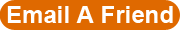
<style>
.page{position:relative;width:180px;height:30px;background:#df6900}
.page>*{position:absolute;margin:0}
.t1{font:24px "Arial-BoldMT";color:#ffffff}
</style>
<div class="page">
<p class="t1" style="left:7px;top:6px;width:166px;height:17px">Email A Friend</p>
</div>
